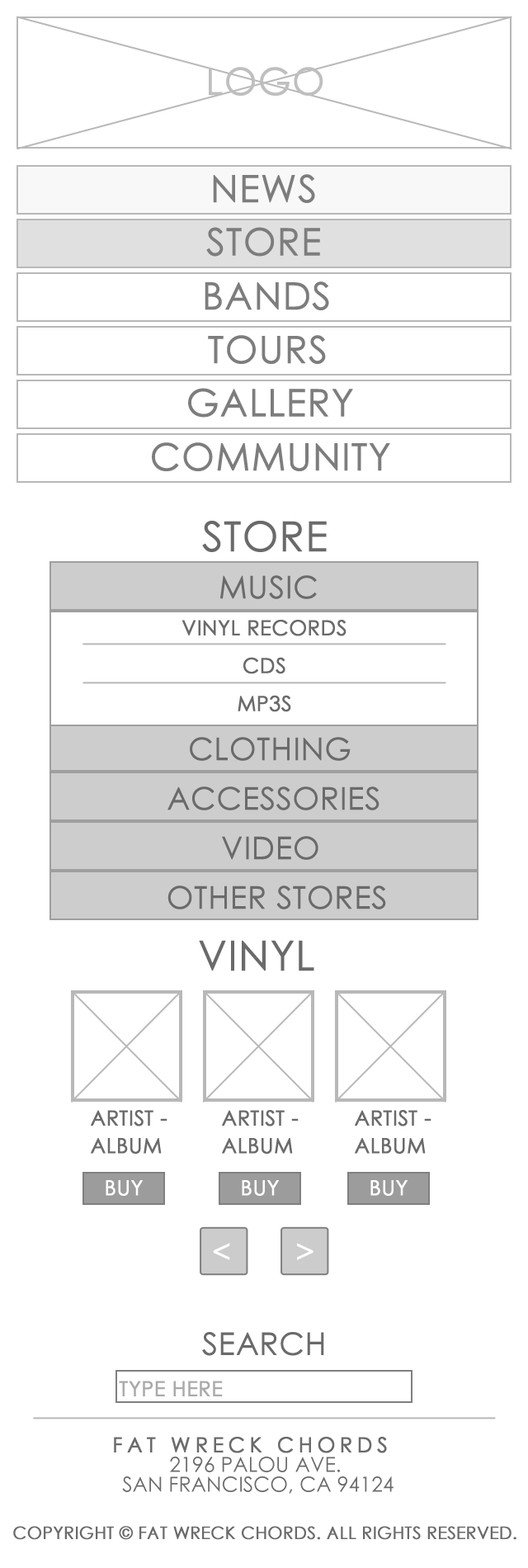
<style>
.page{position:relative;width:528px;height:1568px;background:#ffffff}
.page>*{position:absolute;margin:0}
.t1{font:37.8px "CenturyGothic";color:#bfbfbf;text-transform:uppercase;font-weight:bold}
.t2{font:37.8px "CenturyGothic";color:#7d7d7d;text-transform:uppercase;font-weight:bold}
.t3{font:41.3px "CenturyGothic";color:#6a6a6a;text-transform:uppercase;font-weight:bold}
.t4{font:30.9px "CenturyGothic";color:#6a6a6a;text-transform:uppercase;font-weight:bold}
.t5{font:20.6px/37.8px "CenturyGothic";color:#6a6a6a;text-transform:uppercase;font-weight:bold}
.t6{font:20.6px/27.5px "CenturyGothic";color:#6a6a6a;text-transform:uppercase;font-weight:bold}
.t7{font:30.9px "CenturyGothic";color:#ffffff;text-transform:uppercase;font-weight:bold}
.t8{font:20.6px "CenturyGothic";color:#aaaaaa;text-transform:uppercase;font-weight:bold}
.t9{font:20.6px/19.8px "CenturyGothic";color:#6a6a6a;text-transform:uppercase}
.t10{font:20.6px/19.8px "CenturyGothic";letter-spacing:0.2em;color:#6a6a6a;text-transform:uppercase;font-weight:bold}
.t11{font:17.2px "CenturyGothic";color:#6a6a6a;text-transform:uppercase;font-weight:bold}
</style>
<div class="page">
<p class="t1" style="left:209px;top:67px;width:115px;height:29px">logo</p>
<p class="t2" style="left:213px;top:174px;width:102px;height:29px">news</p>
<p class="t2" style="left:206px;top:227px;width:114px;height:30px">store</p>
<p class="t2" style="left:205px;top:281px;width:124px;height:29px">bands</p>
<p class="t2" style="left:208px;top:335px;width:118px;height:29px">tours</p>
<p class="t2" style="left:188px;top:388px;width:165px;height:30px">gallery</p>
<p class="t2" style="left:152px;top:442px;width:238px;height:29px">community</p>
<p class="t3" style="left:202px;top:521px;width:125px;height:31px">store</p>
<p class="t4" style="left:220px;top:575px;width:97px;height:24px">music</p>
<p class="t5" style="left:182px;top:620px;width:165px;height:92px;text-align:center">Vinyl records<br>CDs<br>mp3s</p>
<p class="t4" style="left:190px;top:737px;width:161px;height:24px">clothing</p>
<p class="t4" style="left:168px;top:786px;width:212px;height:24px">accessories</p>
<p class="t4" style="left:222px;top:836px;width:97px;height:24px">video</p>
<p class="t4" style="left:168px;top:886px;width:218px;height:23px">other stores</p>
<p class="t3" style="left:199px;top:940px;width:115px;height:31px">vinyl</p>
<p class="t6" style="left:91px;top:1110px;width:77px;height:44px">ARTIST -<br>ALBUM</p>
<p class="t6" style="left:222px;top:1110px;width:77px;height:44px">ARTIST -<br>ALBUM</p>
<p class="t6" style="left:355px;top:1110px;width:77px;height:44px">ARTIST -<br>ALBUM</p>
<p class="t7" style="left:213px;top:1243px;width:17px;height:17px">&lt;</p>
<p class="t7" style="left:297px;top:1243px;width:17px;height:17px">&gt;</p>
<p class="t4" style="left:202px;top:1332px;width:122px;height:24px">SEARCH</p>
<p class="t8" style="left:119px;top:1381px;width:104px;height:15px">TYPE HERE</p>
<p class="t9" style="left:114px;top:1437px;width:280px;height:57px;text-align:center"><span class="t10">FAT WRECK CHORDS  <br></span>2196 Palou Ave. <br>San Francisco, CA 94124</p>
<p class="t11" style="left:13px;top:1526px;width:504px;height:14px">Copyright © Fat Wreck Chords. All rights reserved.</p>
</div>
